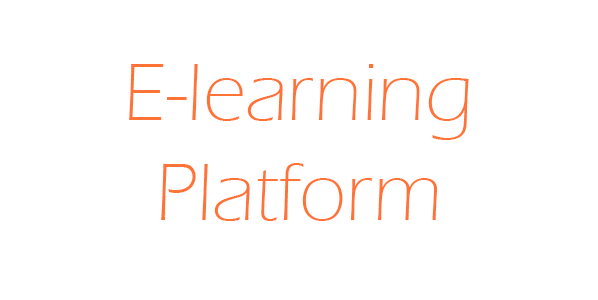
<style>
.page{position:relative;width:598px;height:300px;background:#ffffff}
.page>*{position:absolute;margin:0}
.t1{font:84px "ErasITC-Light";color:#ff7336}
</style>
<div class="page">
<p class="t1" style="left:129px;top:64px;width:340px;height:157px;text-align:center">E-learning Platform</p>
</div>
